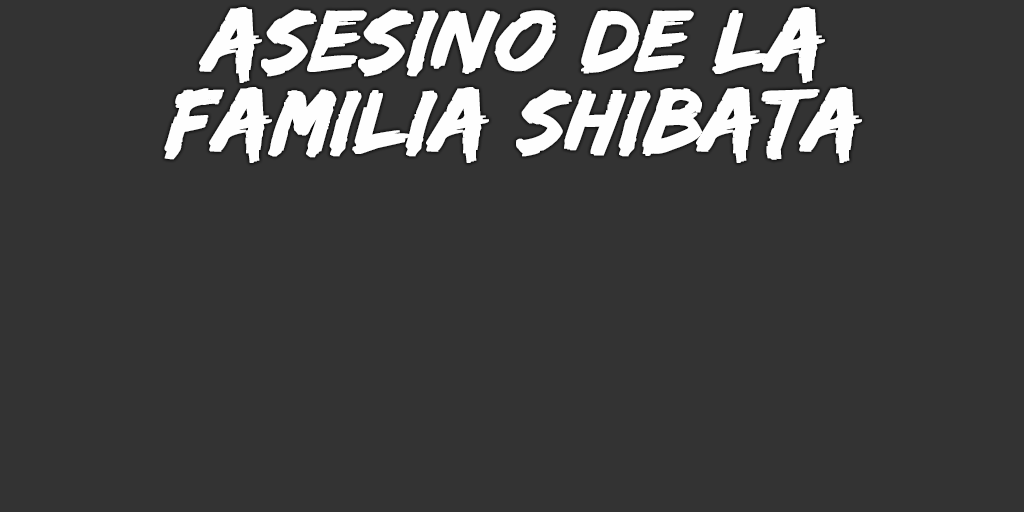
<style>
.page{position:relative;width:1024px;height:512px;background:#333333}
.page>*{position:absolute;margin:0}
.t1{font:90px/80px "EdoSZ";color:#fefefe;font-weight:bold;font-style:italic;scale:1.04 1}
</style>
<div class="page">
<p class="t1" style="left:164px;top:7px;width:698px;height:156px;text-align:center">asesino de la<br>familia shibata</p>
</div>
